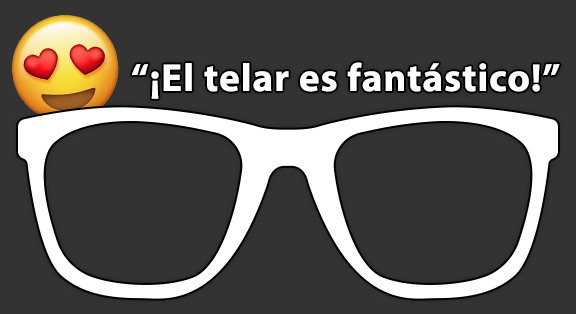
<style>
.page{position:relative;width:576px;height:314px;background:#333333}
.page>*{position:absolute;margin:0}
.t1{font:39.2px "MyriadPro-Bold";letter-spacing:0.025em;color:#ffffff}
</style>
<div class="page">
<p class="t1" style="left:132px;top:62px;width:428px;height:37px">“¡El telar es fantástico!”</p>
</div>
